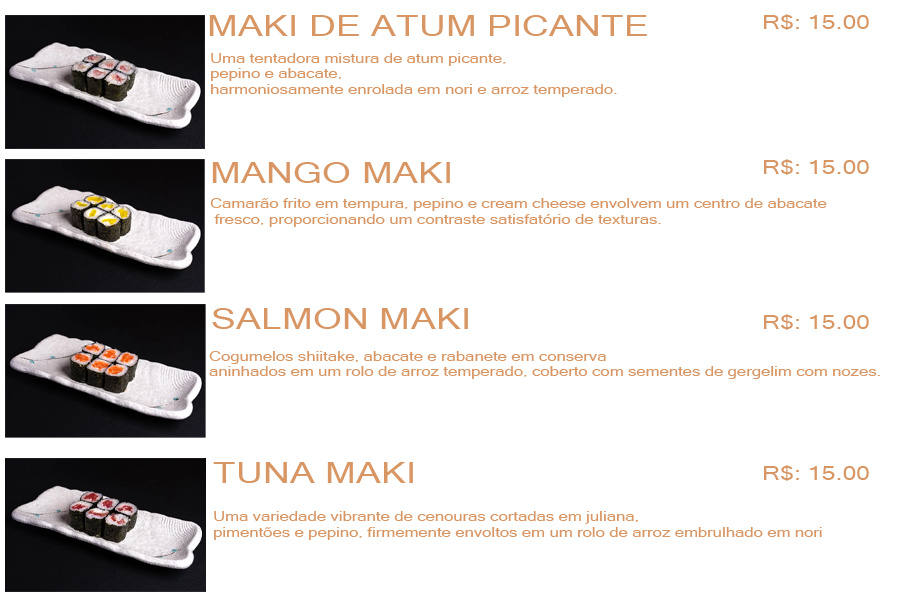
<style>
.page{position:relative;width:900px;height:600px;background:#ffffff}
.page>*{position:absolute;margin:0}
.t1{font:29.2px "MicrosoftSansSerif";color:#d89664;scale:1.29 1}
.t2{font:19.4px "MicrosoftSansSerif";color:#d89664;scale:1.29 1}
.t3{font:13px "MicrosoftSansSerif";color:#d89664;scale:1.29 1}
</style>
<div class="page">
<p class="t1" style="left:209px;top:15px;width:438px;height:21px">MAKI DE ATUM PICANTE</p>
<p class="t2" style="left:764px;top:14px;width:105px;height:16px">R$: 15.00</p>
<p class="t3" style="left:211px;top:53px;width:406px;height:44px">Uma tentadora mistura de atum picante, <br>pepino e abacate, <br>harmoniosamente enrolada em nori e arroz temperado.</p>
<p class="t2" style="left:764px;top:159px;width:105px;height:16px">R$: 15.00</p>
<p class="t1" style="left:212px;top:162px;width:238px;height:21px">MANGO MAKI</p>
<p class="t3" style="left:210px;top:198px;width:617px;height:29px">Camarão frito em tempura, pepino e cream cheese envolvem um centro de abacate<br> fresco, proporcionando um contraste satisfatório de texturas.</p>
<p class="t1" style="left:212px;top:308px;width:256px;height:21px">SALMON MAKI</p>
<p class="t2" style="left:764px;top:314px;width:105px;height:16px">R$: 15.00</p>
<p class="t3" style="left:209px;top:351px;width:671px;height:28px">Cogumelos shiitake, abacate e rabanete em conserva <br>aninhados em um rolo de arroz temperado, coberto com sementes de gergelim com nozes.</p>
<p class="t1" style="left:213px;top:462px;width:200px;height:21px">TUNA MAKI</p>
<p class="t2" style="left:764px;top:465px;width:105px;height:16px">R$: 15.00</p>
<p class="t3" style="left:214px;top:511px;width:608px;height:29px">Uma variedade vibrante de cenouras cortadas em juliana, <br>pimentões e pepino, firmemente envoltos em um rolo de arroz embrulhado em nori</p>
</div>
